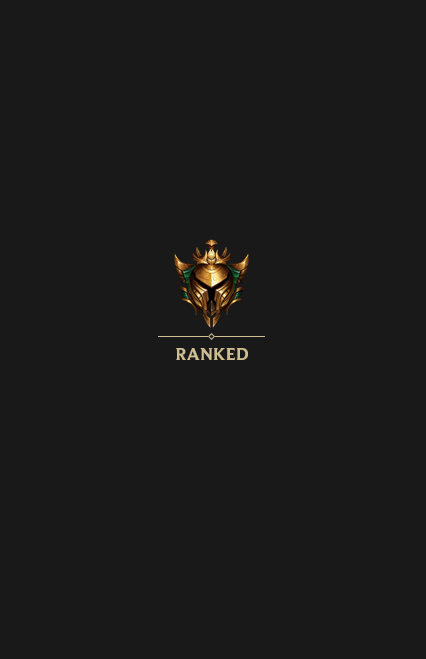
<style>
.page{position:relative;width:426px;height:659px;background:#191919}
.page>*{position:absolute;margin:0}
.t1{font:18px "BeaufortforLOL-Bold";color:#cdbe91}
</style>
<div class="page">
<p class="t1" style="left:176px;top:348px;width:72px;height:12px">RANKED</p>
</div>
